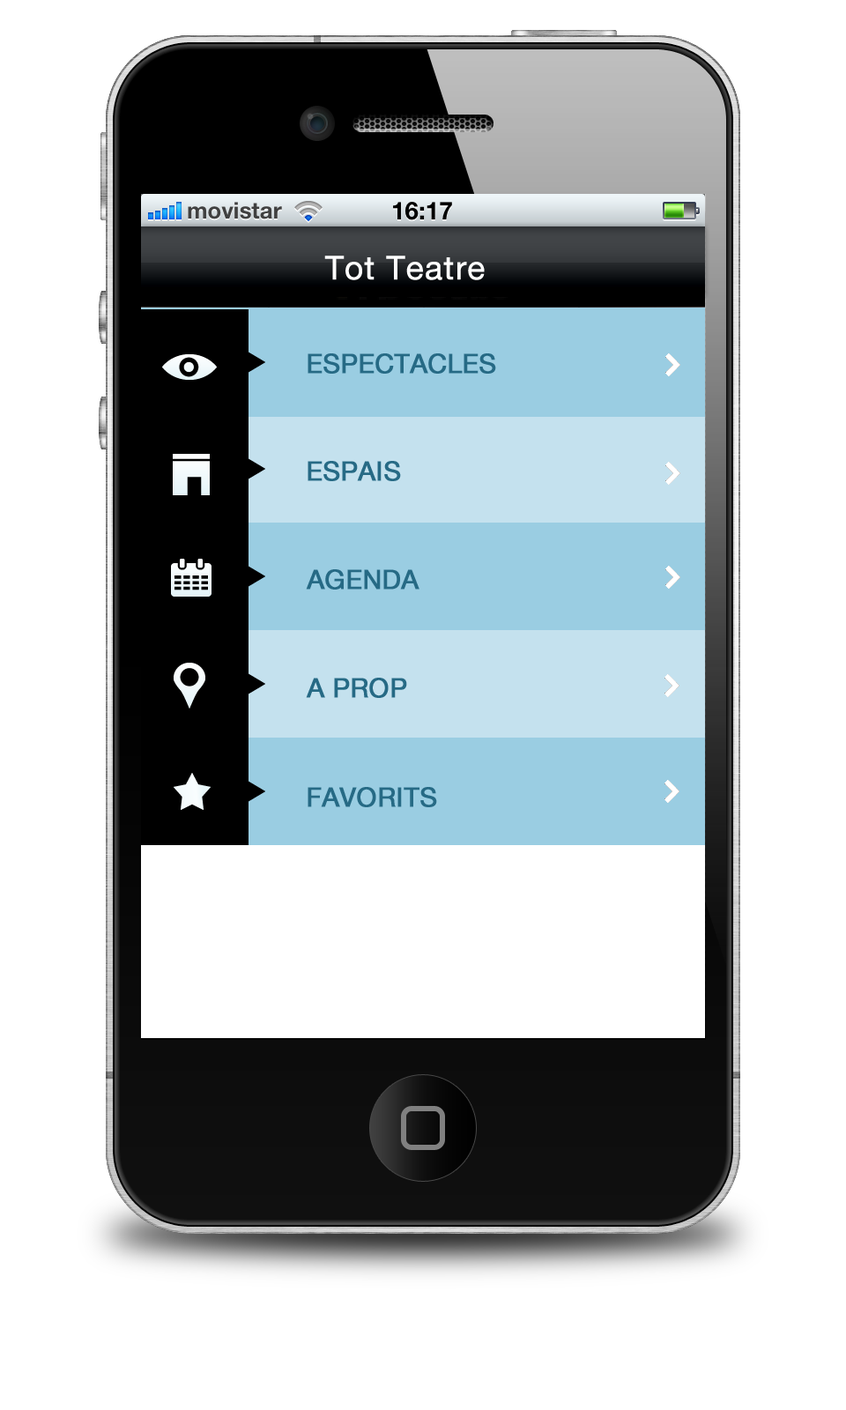
<style>
.page{position:relative;width:846px;height:1410px;background:#ffffff}
.page>*{position:absolute;margin:0}
.t1{font:32.6px "HelveticaNeueLTPro-Roman";letter-spacing:0.011em;color:#ffffff;font-weight:bold}
.t2{font:26.4px "HelveticaNeueLTPro-Roman";color:#266a85;font-weight:bold}
</style>
<div class="page">
<p class="t1" style="left:324px;top:256px;width:161px;height:24px">Tot Teatre</p>
<p class="t2" style="left:308px;top:353px;width:188px;height:21px">ESPECTACLES</p>
<p class="t2" style="left:308px;top:461px;width:93px;height:20px">ESPAIS</p>
<p class="t2" style="left:306px;top:569px;width:113px;height:20px">AGENDA</p>
<p class="t2" style="left:306px;top:678px;width:101px;height:20px">A PROP</p>
<p class="t2" style="left:308px;top:787px;width:129px;height:20px">FAVORITS</p>
</div>
